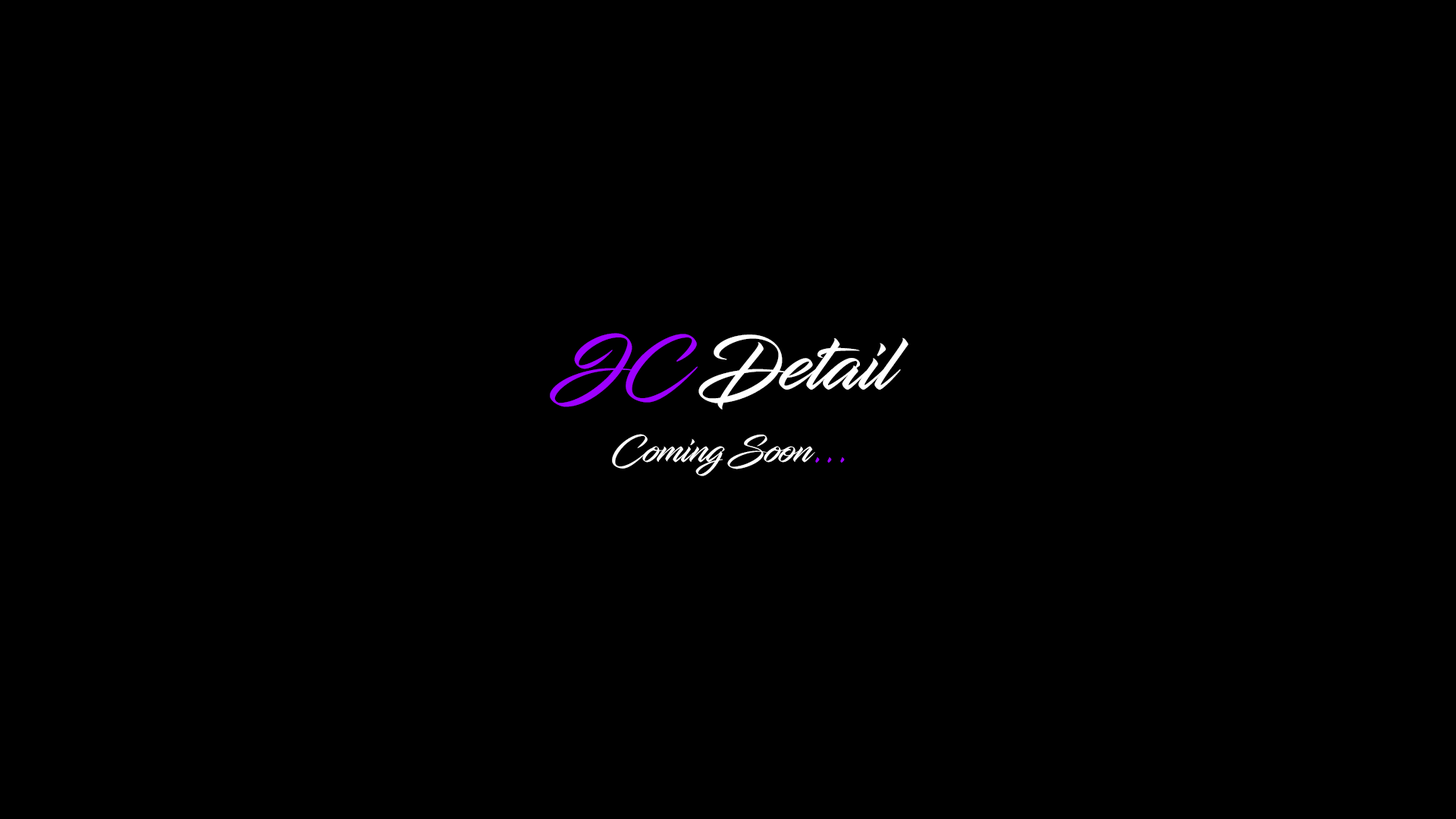
<style>
.page{position:relative;width:1456px;height:819px;background:#000000}
.page>*{position:absolute;margin:0}
.t1{font:75.8px "InfiniteStroke";color:#ffffff}
.t2{font:75.8px "InfiniteStroke";color:#9d00ff}
.t3{font:37.9px "InfiniteStroke";color:#ffffff}
.t4{font:37.9px "InfiniteStroke";color:#9d00ff}
</style>
<div class="page">
<p class="t1" style="left:550px;top:333px;width:358px;height:76px"><span class="t2">JC </span>Detail</p>
<p class="t3" style="left:612px;top:434px;width:233px;height:42px">Coming Soon<span class="t4">...</span></p>
</div>
